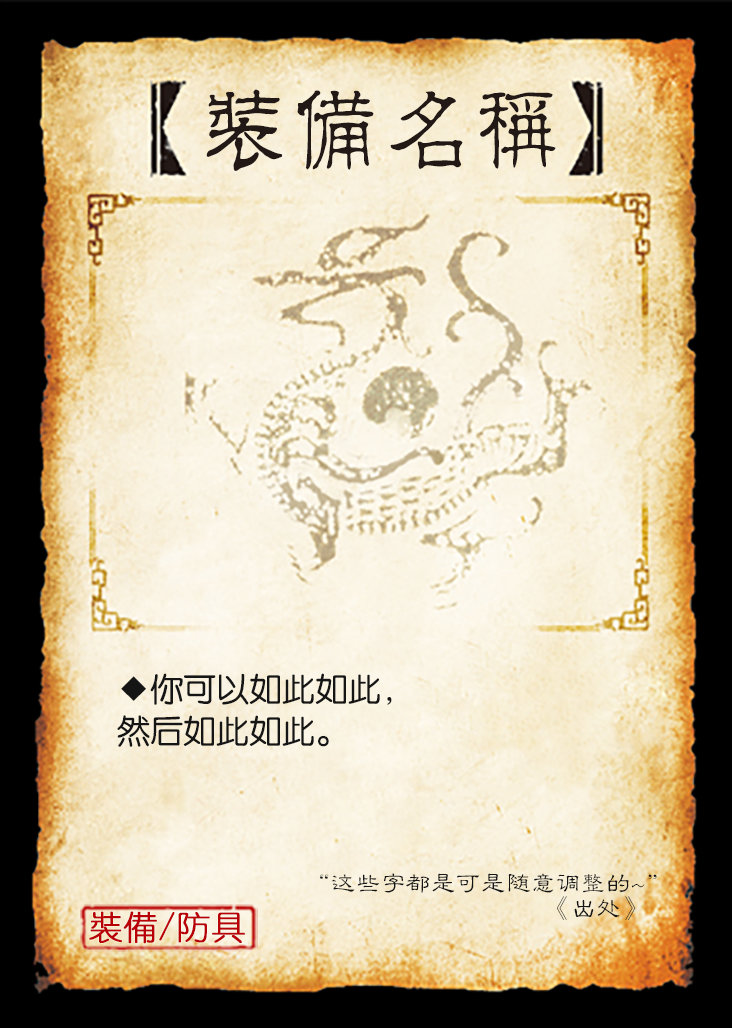
<style>
.page{position:relative;width:732px;height:1028px}
.page>*{position:absolute;margin:0}
.t1{font:95.8px "JMFLS_GBK";color:#221815;scale:0.95 1}
.t2{font:33.3px/41.7px "FZY3JW--GB1-0";letter-spacing:-0.01em;color:#151515}
.t3{font:25px/25px "FZLBJW--GB1-0";color:#151515}
.t4{font:33.3px "YouYuan";color:#ba0007;font-weight:bold}
</style>
<div class="page">
<p class="t1" style="left:206px;top:89px;width:350px;height:82px">装备名称</p>
<p class="t2" style="left:117px;top:673px;width:275px;height:74px">◆你可以如此如此，<br>然后如此如此。</p>
<p class="t3" style="left:320px;top:873px;width:337px;height:47px;text-align:right">“这些字都是可是随意调整的~”<br>                                      《出处》</p>
<p class="t4" style="left:89px;top:911px;width:156px;height:33px">裝備/防具</p>
</div>
